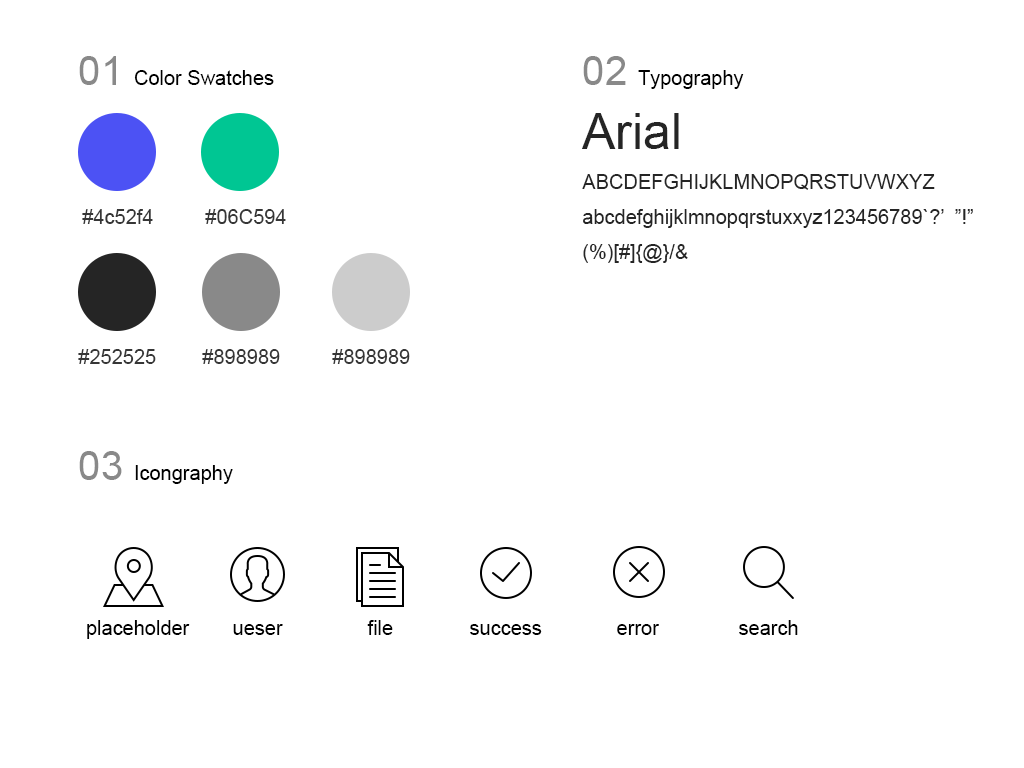
<style>
.page{position:relative;width:1024px;height:768px;background:#ffffff}
.page>*{position:absolute;margin:0}
.t1{font:20px "ArialMT";color:#000000}
.t2{font:40px "ArialMT";color:#898989}
.t3{font:50px "ArialMT";color:#252525}
.t4{font:20px "ArialMT";color:#252525}
.t5{font:20px "ArialMT";color:#363636}
.t6{font:20.1px "ArialMT";color:#000000}
</style>
<div class="page">
<p class="t1" style="left:79px;top:56px;width:195px;height:29px"><span class="t2">01</span>  Color Swatches</p>
<p class="t1" style="left:583px;top:56px;width:161px;height:33px"><span class="t2">02</span>  Typography</p>
<p class="t3" style="left:582px;top:113px;width:97px;height:36px">Arial</p>
<p class="t4" style="left:582px;top:174px;width:391px;height:89px">ABCDEFGHIJKLMNOPQRSTUVWXYZ<br>abcdefghijklmnopqrstuxxyz123456789`?’”!”<br>(%)[#]{@}/&amp;</p>
<p class="t5" style="left:82px;top:209px;width:71px;height:15px">#4c52f4</p>
<p class="t5" style="left:205px;top:209px;width:81px;height:15px">#06C594</p>
<p class="t5" style="left:78px;top:349px;width:78px;height:15px">#252525</p>
<p class="t5" style="left:202px;top:349px;width:78px;height:15px">#898989</p>
<p class="t5" style="left:332px;top:349px;width:78px;height:15px">#898989</p>
<p class="t1" style="left:79px;top:451px;width:154px;height:33px"><span class="t2">03</span>  Icongraphy</p>
<p class="t6" style="left:87px;top:620px;width:103px;height:19px">placeholder</p>
<p class="t1" style="left:233px;top:624px;width:50px;height:11px">ueser</p>
<p class="t1" style="left:367px;top:620px;width:26px;height:15px">file</p>
<p class="t1" style="left:470px;top:624px;width:72px;height:11px">success</p>
<p class="t1" style="left:617px;top:624px;width:42px;height:11px">error</p>
<p class="t1" style="left:739px;top:620px;width:59px;height:15px">search</p>
</div>
